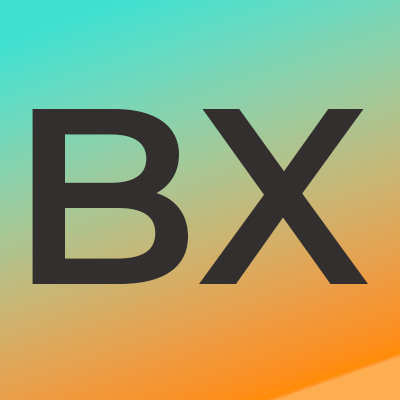
<style>
.page{position:relative;width:400px;height:400px}
.page>*{position:absolute;margin:0}
.t1{font:250px "Montserrat-SemiBold";color:#332f2e}
</style>
<div class="page">
<p class="t1" style="left:32px;top:109px;width:336px;height:175px">BX</p>
</div>
